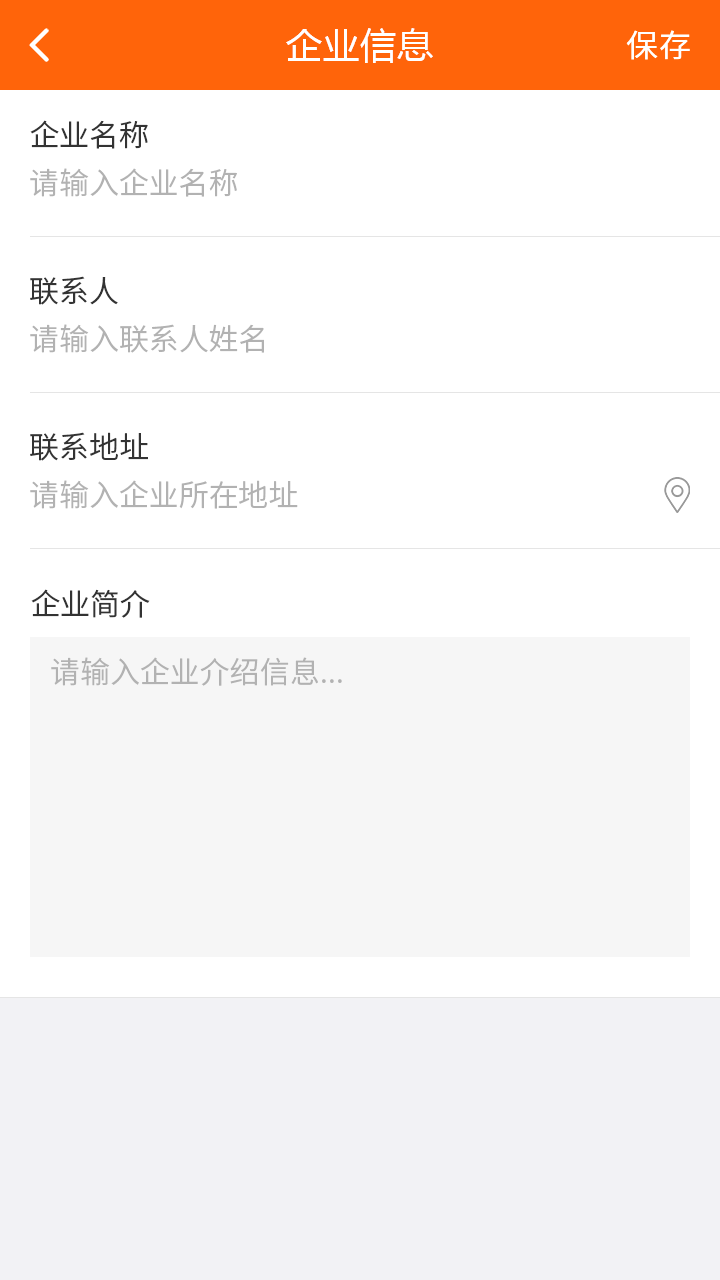
<style>
.page{position:relative;width:720px;height:1280px;background:#ffffff}
.page>*{position:absolute;margin:0}
.t1{font:36px "MicrosoftYaHei";letter-spacing:0.03em;color:#ffffff}
.t2{font:32px "NotoSansCJKsc-Regular";letter-spacing:0.03em;color:#ffffff;font-variant:small-caps}
.t3{font:30px "NotoSansCJKsc-DemiLight";color:#333333}
.t4{font:30px "NotoSansCJKsc-DemiLight";color:#b2b2b2}
</style>
<div class="page">
<p class="t1" style="left:286px;top:28px;width:147px;height:35px">企业信息</p>
<p class="t2" style="left:626px;top:30px;width:64px;height:30px">保存</p>
<p class="t3" style="left:30px;top:120px;width:118px;height:29px">企业名称</p>
<p class="t4" style="left:30px;top:168px;width:207px;height:29px">请输入企业名称</p>
<p class="t3" style="left:30px;top:276px;width:88px;height:29px">联系人</p>
<p class="t4" style="left:30px;top:324px;width:234px;height:29px">请输入联系人姓名</p>
<p class="t3" style="left:30px;top:432px;width:118px;height:29px">联系地址</p>
<p class="t4" style="left:30px;top:480px;width:268px;height:29px">请输入企业所在地址</p>
<p class="t3" style="left:31px;top:589px;width:119px;height:29px">企业简介</p>
<p class="t4" style="left:51px;top:657px;width:291px;height:29px">请输入企业介绍信息...</p>
</div>
